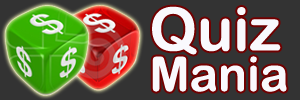
<style>
.page{position:relative;width:300px;height:100px;background:#333333}
.page>*{position:absolute;margin:0}
.t1{font:60px "ArialRoundedMTBold";color:#f9f9fd}
.t2{font:48px "ArialRoundedMTBold";color:#f9f9fd}
</style>
<div class="page">
<p class="t1" style="left:152px;top:6px;width:129px;height:49px">Quiz</p>
<p class="t2" style="left:152px;top:56px;width:135px;height:36px">Mania</p>
</div>
